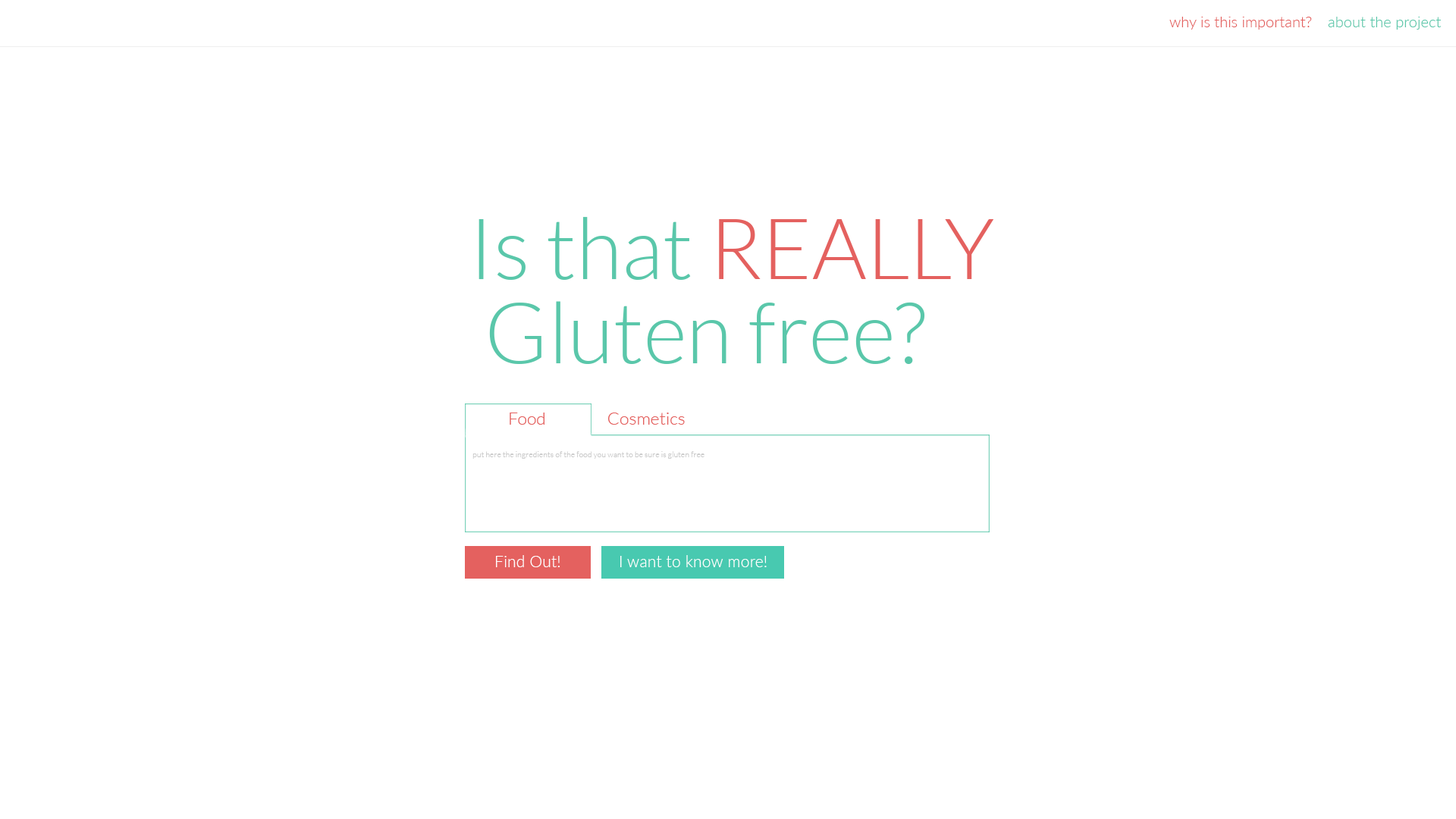
<style>
.page{position:relative;width:1456px;height:819px;background:#ffffff}
.page>*{position:absolute;margin:0}
.t1{font:15.2px "Lato-Light";color:#e4615f}
.t2{font:15.2px "Lato-Light";color:#5ac7aa}
.t3{font:84.6px/84.2px "Lato-Light";color:#5ac7aa}
.t4{font:84.6px/84.2px "Lato-Light";color:#e4615f}
.t5{font:17.5px "Lato-Light";color:#e4615f}
.t6{font:8px "Lato-Light";color:#cccccc}
.t7{font:16.4px "Lato-Light";color:#ffffff}
</style>
<div class="page">
<p class="t1" style="left:1169px;top:17px;width:143px;height:13px">why is this important?</p>
<p class="t2" style="left:1328px;top:17px;width:114px;height:13px">about the project</p>
<p class="t3" style="left:479px;top:217px;width:515px;height:147px;text-align:right">Is that <span class="t4">REALLY<br></span> Gluten free?</p>
<p class="t5" style="left:510px;top:413px;width:34px;height:12px">Food</p>
<p class="t5" style="left:608px;top:413px;width:77px;height:12px">Cosmetics</p>
<p class="t6" style="left:472px;top:451px;width:232px;height:8px">put here the ingredients of the food you want to be sure is gluten free</p>
<p class="t7" style="left:496px;top:555px;width:64px;height:12px">Find Out!</p>
<p class="t7" style="left:620px;top:555px;width:147px;height:12px">I want to know more!</p>
</div>
